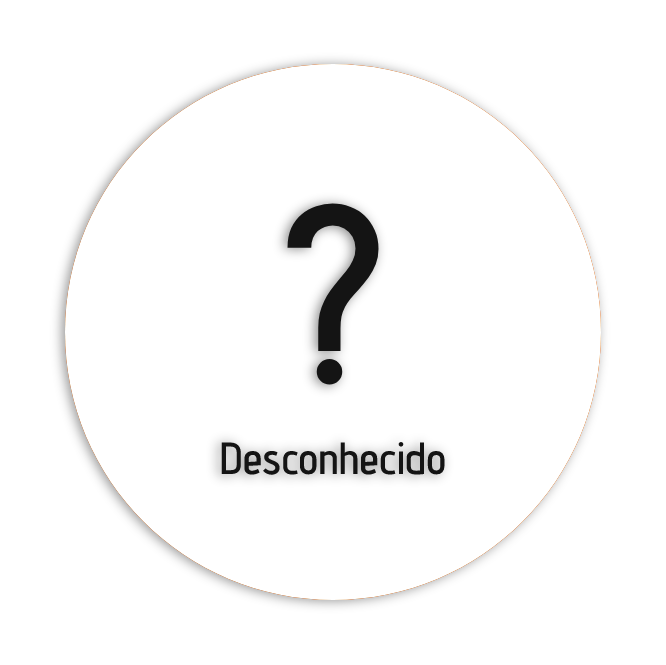
<style>
.page{position:relative;width:666px;height:665px;background:#ffffff}
.page>*{position:absolute;margin:0}
.t1{font:250px "AdventPro-SemiBold";color:#141414}
.t2{font:45px "AdventPro-SemiBold";color:#141414}
</style>
<div class="page">
<p class="t1" style="left:287px;top:203px;width:92px;height:182px">?</p>
<p class="t2" style="left:221px;top:442px;width:224px;height:33px">Desconhecido</p>
</div>
